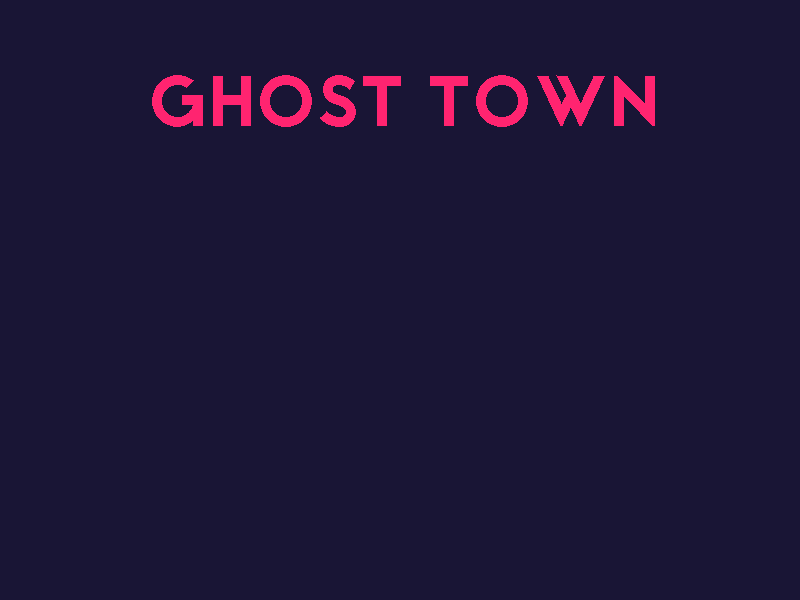
<style>
.page{position:relative;width:800px;height:600px;background:#191535}
.page>*{position:absolute;margin:0}
.t1{font:72px "Jaapokki-Regular";color:#ff2470}
</style>
<div class="page">
<p class="t1" style="left:152px;top:75px;width:503px;height:52px">GHOST TOWN</p>
</div>
